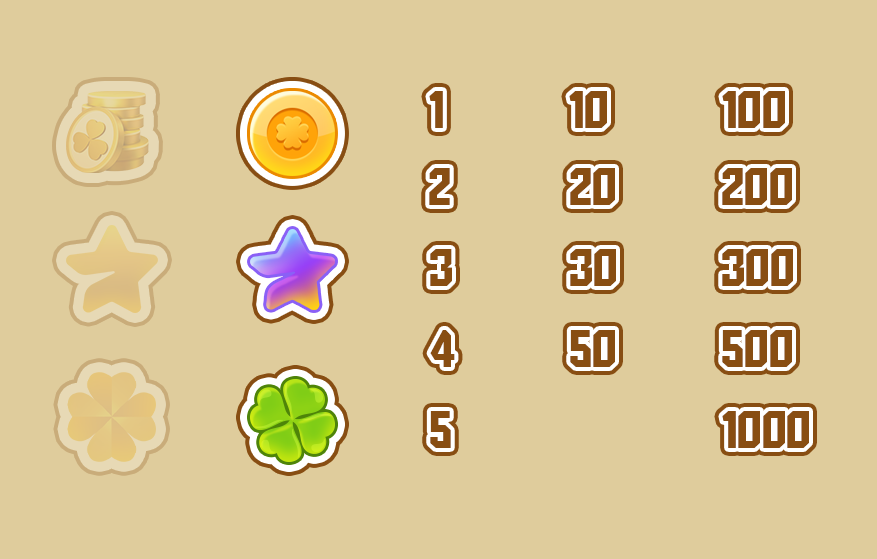
<style>
.page{position:relative;width:877px;height:559px;background:#dfcc9c}
.page>*{position:absolute;margin:0}
.t1{font:52px "AldotheApache";color:#884e13;text-transform:uppercase}
</style>
<div class="page">
<p class="t1" style="left:429px;top:91px;width:14px;height:37px">1</p>
<p class="t1" style="left:569px;top:91px;width:38px;height:37px">10</p>
<p class="t1" style="left:722px;top:91px;width:63px;height:37px">100</p>
<p class="t1" style="left:429px;top:168px;width:21px;height:37px">2</p>
<p class="t1" style="left:570px;top:168px;width:45px;height:37px">20</p>
<p class="t1" style="left:722px;top:168px;width:70px;height:37px">200</p>
<p class="t1" style="left:430px;top:249px;width:22px;height:37px">3</p>
<p class="t1" style="left:570px;top:249px;width:46px;height:37px">30</p>
<p class="t1" style="left:722px;top:249px;width:71px;height:37px">300</p>
<p class="t1" style="left:430px;top:330px;width:25px;height:37px">4</p>
<p class="t1" style="left:570px;top:330px;width:45px;height:37px">50</p>
<p class="t1" style="left:722px;top:330px;width:70px;height:37px">500</p>
<p class="t1" style="left:430px;top:411px;width:21px;height:37px">5</p>
<p class="t1" style="left:722px;top:411px;width:87px;height:37px">1000</p>
</div>
